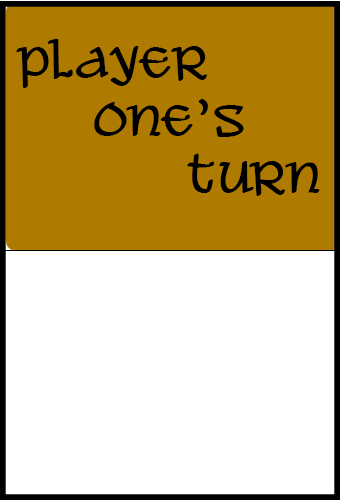
<style>
.page{position:relative;width:340px;height:500px;background:#ffffff}
.page>*{position:absolute;margin:0}
.t1{font:48px "AleandWenchesBB";color:#000000}
</style>
<div class="page">
<p class="t1" style="left:16px;top:39px;width:304px;height:157px;text-align:center">Player <br>       One’s <br>               turn</p>
</div>
